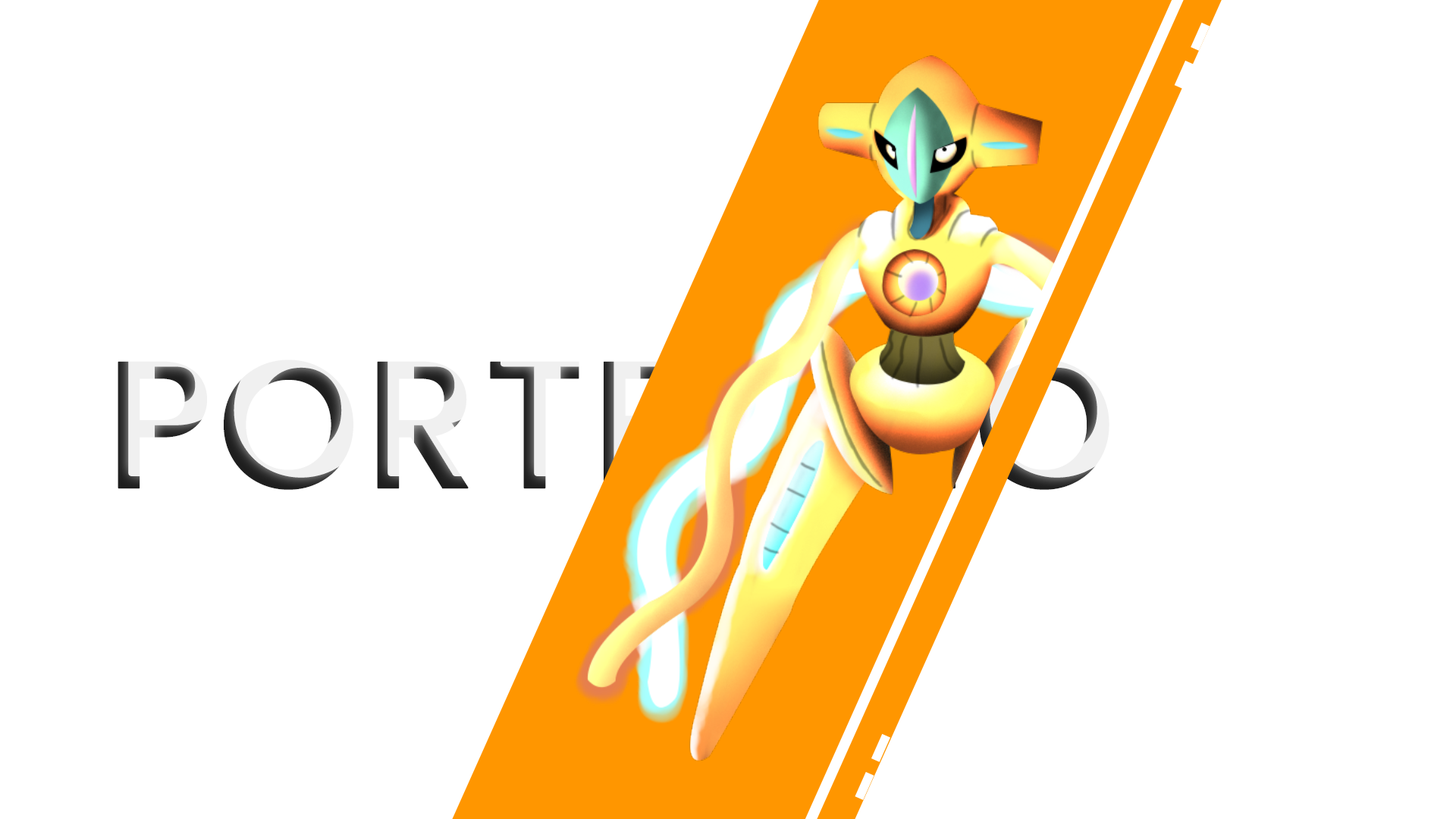
<style>
.page{position:relative;width:1456px;height:819px;background:#ffffff}
.page>*{position:absolute;margin:0}
.t1{font:181px "Poppins-Medium";text-transform:uppercase;font-weight:bold}
</style>
<div class="page">
<p class="t1" style="left:118px;top:359px;width:991px;height:131px">Portfolio</p>
</div>
